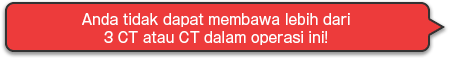
<style>
.page{position:relative;width:450px;height:58px;background:#ed3b3b}
.page>*{position:absolute;margin:0}
.t1{font:14px/18px "GothicMB101Pro-Regular";color:#ffffff}
</style>
<div class="page">
<p class="t1" style="left:82px;top:13px;width:268px;height:32px;text-align:center">Anda tidak dapat membawa lebih dari<br>3 CT atau CT dalam operasi ini!</p>
</div>
